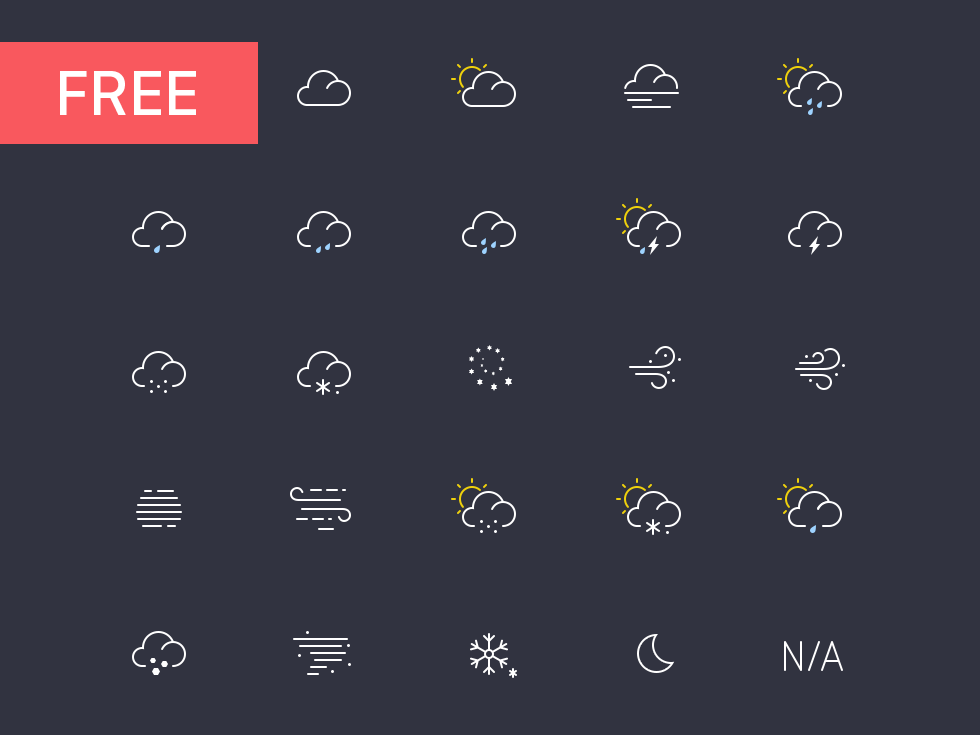
<style>
.page{position:relative;width:980px;height:735px;background:#313340}
.page>*{position:absolute;margin:0}
.t1{font:66px "SanFranciscoDisplay-Medium";color:#ffffff}
</style>
<div class="page">
<p class="t1" style="left:60px;top:71px;width:136px;height:44px">FREE</p>
</div>
